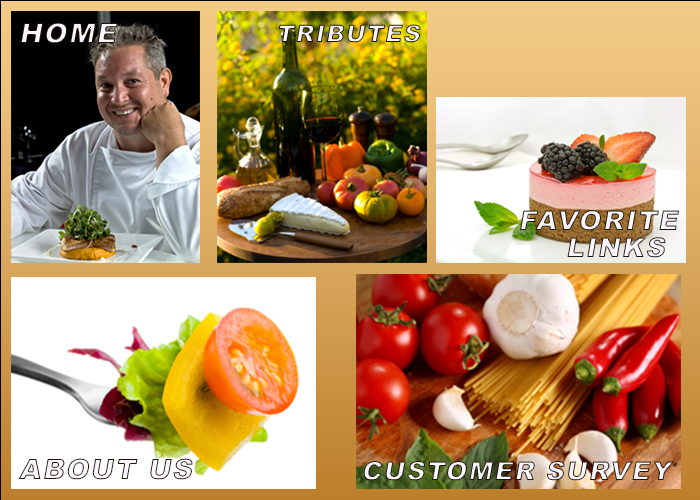
<style>
.page{position:relative;width:700px;height:500px}
.page>*{position:absolute;margin:0}
.t1{font:48px "Arial-Black";letter-spacing:0.05em;text-transform:uppercase;font-style:italic}
.t2{font:41.2px "Arial-Black";letter-spacing:0.05em;text-transform:uppercase;font-style:italic}
.t3{font:44.6px "Arial-Black";letter-spacing:0.05em;text-transform:uppercase;font-style:italic}
</style>
<div class="page">
<p class="t1" style="left:20px;top:22px;width:98px;height:22px">HOme</p>
<p class="t2" style="left:278px;top:24px;width:143px;height:19px">Tributes</p>
<p class="t1" style="left:18px;top:458px;width:175px;height:22px">About US</p>
<p class="t3" style="left:363px;top:461px;width:311px;height:20px">Customer Survey</p>
</div>
